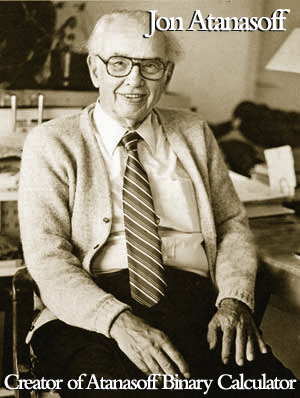
<style>
.page{position:relative;width:300px;height:398px}
.page>*{position:absolute;margin:0}
.t1{font:31.2px "BemboMT-SemiBold";letter-spacing:-0.08em;color:#ffffff;scale:0.95 1}
.t2{font:22.9px "BemboMT-SemiBold";letter-spacing:-0.08em;color:#ffffff;scale:0.95 1}
</style>
<div class="page">
<p class="t1" style="left:144px;top:9px;width:147px;height:29px">Jon Atanasoff</p>
<p class="t2" style="left:4px;top:373px;width:293px;height:22px">Creator of Atanasoff Binary Calculator</p>
</div>
